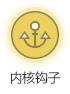
<style>
.page{position:relative;width:70px;height:94px;background:#ffffff}
.page>*{position:absolute;margin:0}
.t1{font:13px "MicrosoftYaHei";color:#323232}
</style>
<div class="page">
<p class="t1" style="left:11px;top:71px;width:50px;height:13px">内核钩子</p>
</div>
